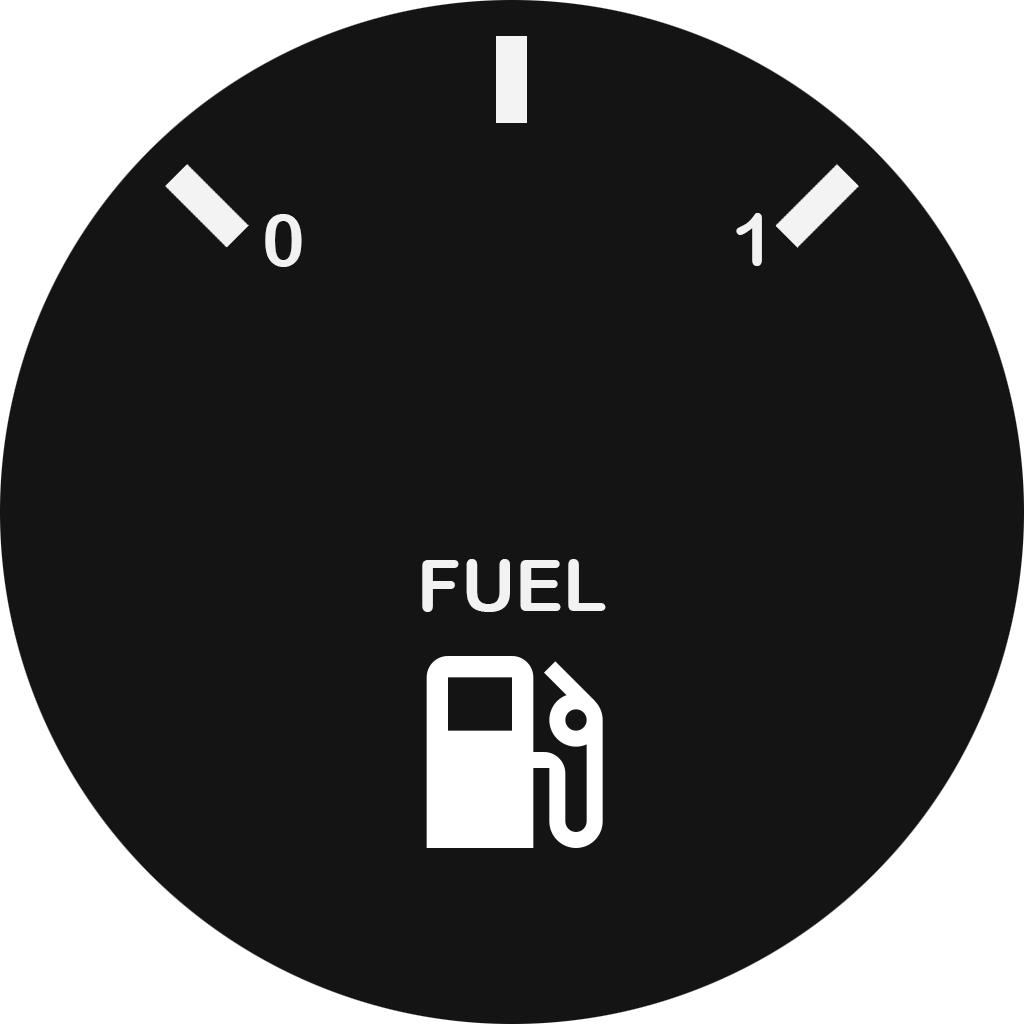
<style>
.page{position:relative;width:1024px;height:1024px;background:#141414}
.page>*{position:absolute;margin:0}
.t1{font:72px "ArialRoundedMTBold";color:#f2f2f2}
</style>
<div class="page">
<p class="t1" style="left:265px;top:214px;width:37px;height:53px">0</p>
<p class="t1" style="left:736px;top:213px;width:26px;height:53px">1</p>
<p class="t1" style="left:422px;top:559px;width:184px;height:53px">FUEL</p>
</div>
